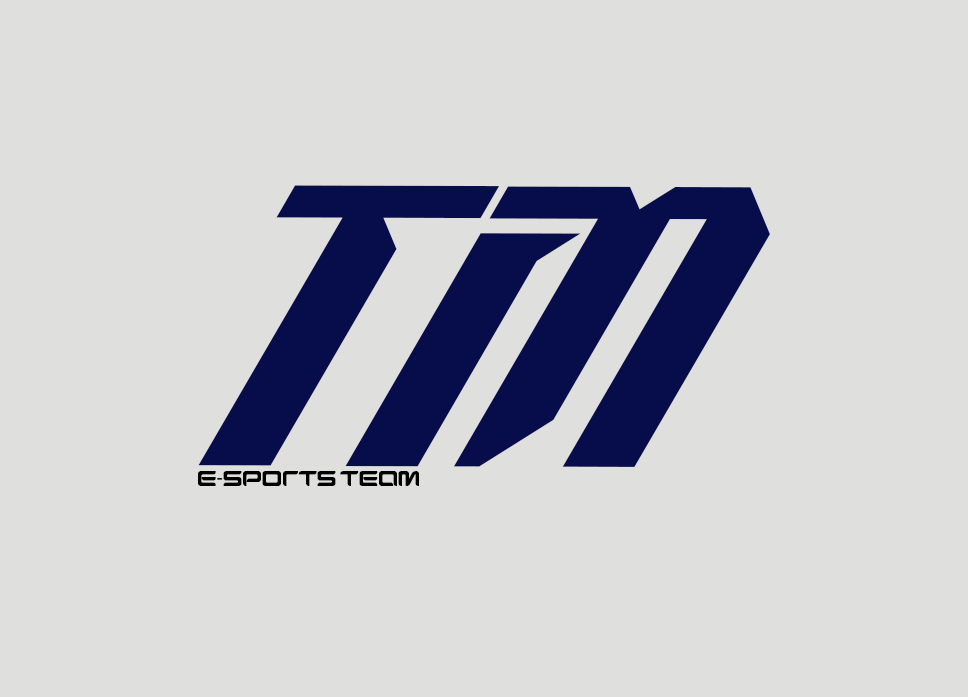
<style>
.page{position:relative;width:968px;height:697px;background:#dfdfde}
.page>*{position:absolute;margin:0}
.t1{font:400px "RacersEnergyPersonalUse";color:#070c4b}
.t2{font:18px "EsportGraph-Regular";color:#000000}
</style>
<div class="page">
<p class="t1" style="left:198px;top:185px;width:572px;height:282px">TM</p>
<p class="t2" style="left:198px;top:471px;width:221px;height:15px">e-sporTs Team</p>
</div>
